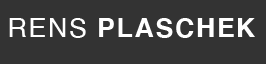
<style>
.page{position:relative;width:266px;height:64px;background:#333333}
.page>*{position:absolute;margin:0}
.t1{font:26.7px "Helvetica-Bold";letter-spacing:0.06em;color:#ffffff}
.t2{font:26.7px "Helvetica";letter-spacing:0.06em;color:#ffffff}
</style>
<div class="page">
<p class="t1" style="left:9px;top:18px;width:246px;height:20px"><span class="t2">RENS</span> PLASCHEK</p>
</div>
